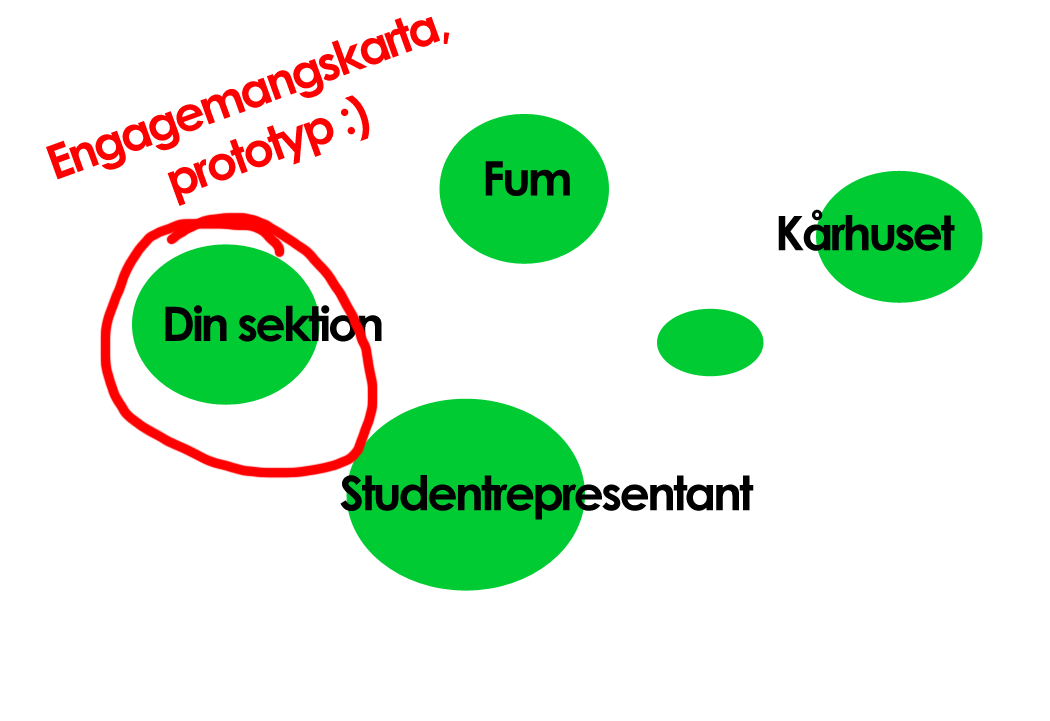
<style>
.page{position:relative;width:1050px;height:721px;background:#ffffff}
.page>*{position:absolute;margin:0}
.t1{font:47.8px "CenturyGothic-Bold";letter-spacing:-0.06em;color:#ff0000}
.t2{font:47.8px "CenturyGothic-Bold";letter-spacing:-0.06em;color:#000000}
</style>
<div class="page">
<p class="t1" style="left:46px;top:16px;width:404px;height:190px;rotate:-20deg">Engagemangskarta, prototyp :)</p>
<p class="t2" style="left:485px;top:161px;width:85px;height:35px">Fum</p>
<p class="t2" style="left:778px;top:209px;width:177px;height:42px">Kårhuset</p>
<p class="t2" style="left:165px;top:305px;width:217px;height:37px">Din sektion</p>
<p class="t2" style="left:340px;top:475px;width:414px;height:45px">Studentrepresentant</p>
</div>
